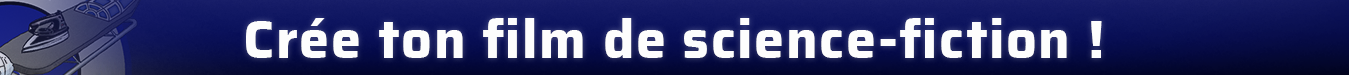
<style>
.page{position:relative;width:1349px;height:75px}
.page>*{position:absolute;margin:0}
.t1{font:54px "Saira-Bold";letter-spacing:0.03em;color:#fdfdfd}
</style>
<div class="page">
<p class="t1" style="left:246px;top:18px;width:856px;height:40px">Crée ton film de science-fiction !</p>
</div>
